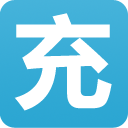
<style>
.page{position:relative;width:128px;height:128px;background:#ffffff}
.page>*{position:absolute;margin:0}
.t1{font:100px "MicrosoftYaHei-Bold";color:#ffffff;text-transform:uppercase}
</style>
<div class="page">
<p class="t1" style="left:14px;top:13px;width:98px;height:98px">充</p>
</div>
